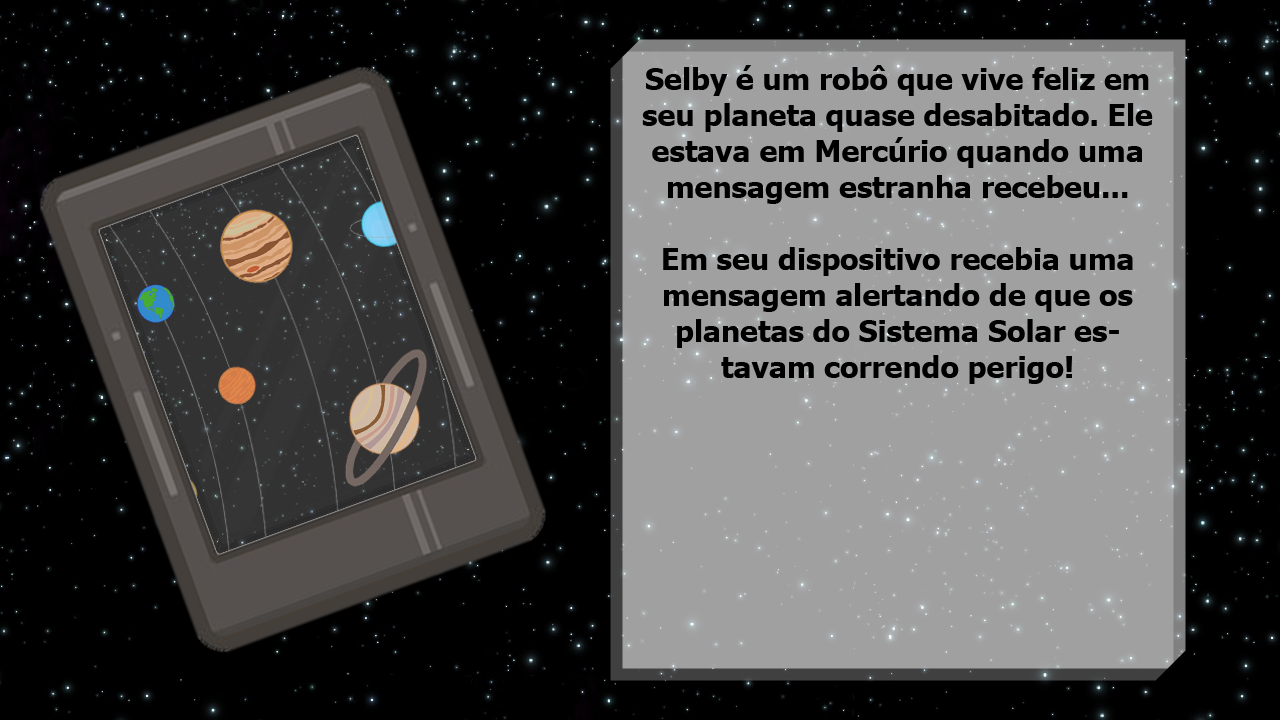
<style>
.page{position:relative;width:1280px;height:720px;background:#000000}
.page>*{position:absolute;margin:0}
.t1{font:30px "Tahoma-Bold";color:#000000}
</style>
<div class="page">
<p class="t1" style="left:642px;top:65px;width:511px;height:319px;text-align:center">Selby é um robô que vive feliz em seu planeta quase desabitado. Ele estava em Mercúrio quando uma mensagem estranha recebeu...<br><br>Em seu dispositivo recebia uma mensagem alertando de que os planetas do Sistema Solar estavam correndo perigo!</p>
</div>
